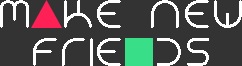
<style>
.page{position:relative;width:242px;height:66px;background:#333333}
.page>*{position:absolute;margin:0}
.t1{font:37.5px "NEONCLUBMUSIC";letter-spacing:0.025em;color:#ffffff}
</style>
<div class="page">
<p class="t1" style="left:0px;top:0px;width:242px;height:28px">M KE NEW</p>
<p class="t1" style="left:33px;top:38px;width:176px;height:28px">FRIE DS</p>
</div>
